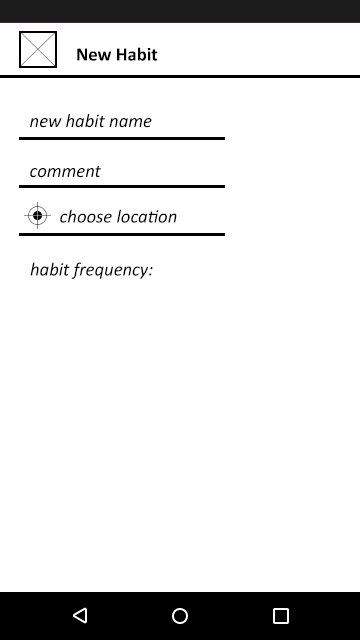
<style>
.page{position:relative;width:360px;height:640px;background:#ffffff}
.page>*{position:absolute;margin:0}
.t1{font:18.9px "Calibri-Bold";color:#000000}
.t2{font:19px "Calibri-Italic";color:#000000}
.t3{font:18.7px "Calibri-Italic";color:#000000}
</style>
<div class="page">
<p class="t1" style="left:77px;top:47px;width:81px;height:14px">New Habit</p>
<p class="t2" style="left:30px;top:114px;width:122px;height:14px">new habit name</p>
<p class="t2" style="left:30px;top:166px;width:71px;height:12px">comment</p>
<p class="t3" style="left:60px;top:209px;width:117px;height:14px">choose location</p>
<p class="t2" style="left:30px;top:262px;width:123px;height:17px">habit frequency:</p>
</div>
